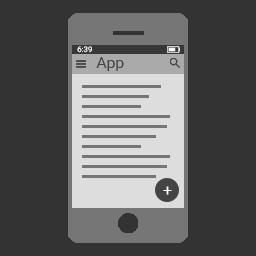
<style>
.page{position:relative;width:256px;height:256px;background:#333333}
.page>*{position:absolute;margin:0}
.t1{font:7.8px "Roboto-Regular"}
.t2{font:15.6px "Roboto-Regular";color:#444444}
.t3{font:15.6px "Roboto-Regular";color:#ffffff}
</style>
<div class="page">
<p class="t1" style="left:77px;top:46px;width:15px;height:7px">6:39</p>
<p class="t2" style="left:96px;top:57px;width:28px;height:14px">App</p>
<p class="t3" style="left:163px;top:186px;width:9px;height:9px">+</p>
</div>
